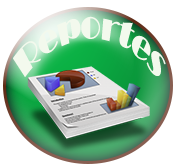
<style>
.page{position:relative;width:178px;height:167px;background:#ffffff}
.page>*{position:absolute;margin:0}
.t1{font:38.7px "Broadway";color:#f3f9ed;scale:0.68 1}
</style>
<div class="page">
<p class="t1" style="left:13px;top:16px;width:153px;height:61px">Reportes</p>
</div>
